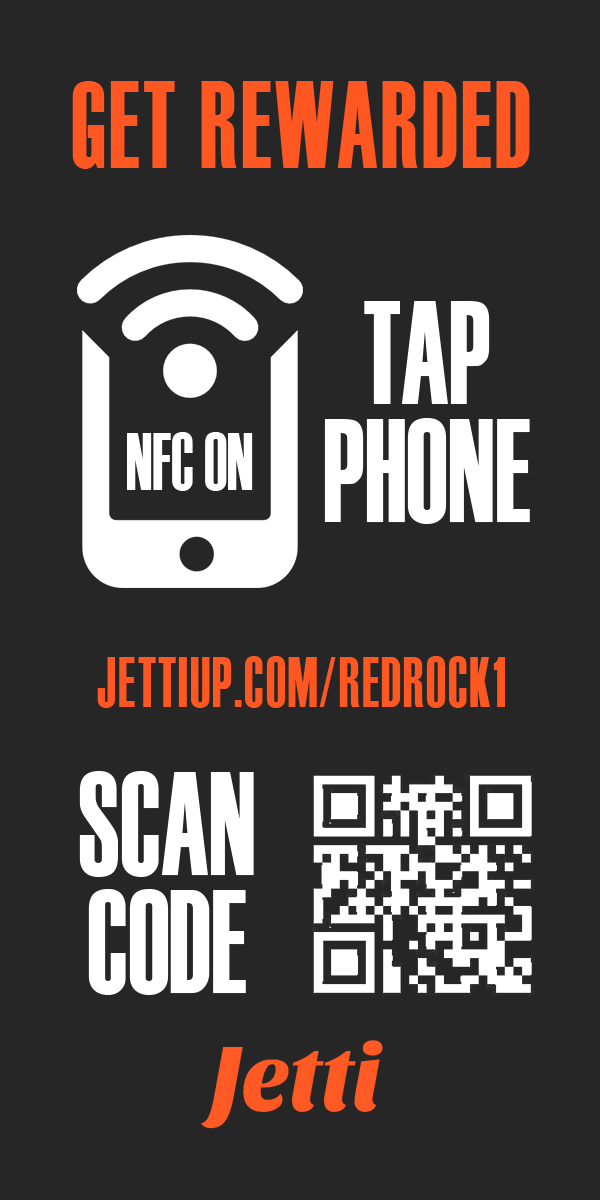
<style>
.page{position:relative;width:600px;height:1200px;background:#262626}
.page>*{position:absolute;margin:0}
.t1{font:123.8px "Haettenschweiler";letter-spacing:0.04em;color:#ff5722;text-transform:uppercase;scale:0.75 1}
.t2{font:147.2px/117.9px "Haettenschweiler";color:#ffffff;scale:0.74 1}
.t3{font:82.5px "Haettenschweiler";color:#ffffff;scale:0.74 1}
.t4{font:70.8px "Haettenschweiler";letter-spacing:0.04em;color:#ff5722;text-transform:uppercase;scale:0.74 1}
.t5{font:95.6px "SansitaOne";letter-spacing:-0.01em;color:#ff5722;scale:0.95 1}
</style>
<div class="page">
<p class="t1" style="left:72px;top:81px;width:458px;height:88px">Get rewarded</p>
<p class="t2" style="left:324px;top:301px;width:206px;height:223px;text-align:center">TAP<br>PHONE</p>
<p class="t3" style="left:127px;top:432px;width:126px;height:59px">NFC ON</p>
<p class="t4" style="left:97px;top:656px;width:408px;height:52px">jettiup.com/REDROCK1</p>
<p class="t2" style="left:79px;top:771px;width:175px;height:224px;text-align:center">SCAN<br>CODE</p>
<p class="t5" style="left:201px;top:1040px;width:182px;height:89px">Jetti</p>
</div>
